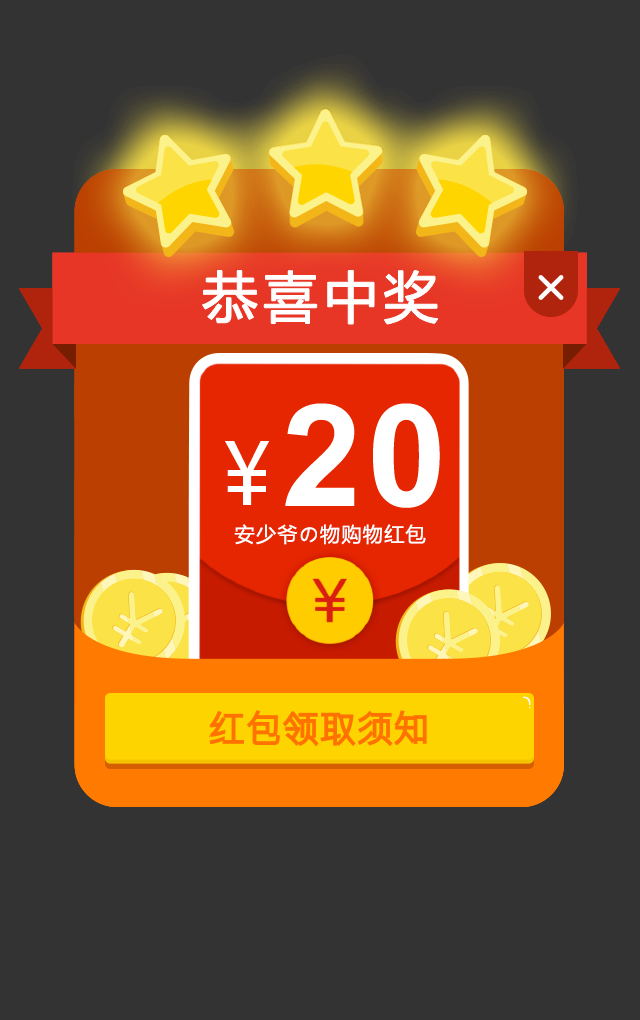
<style>
.page{position:relative;width:640px;height:1020px;background:#333333}
.page>*{position:absolute;margin:0}
.t1{font:54.9px "MicrosoftYaHei";letter-spacing:0.1em;color:#ffffff}
.t2{font:142.6px "Arial-BoldMT";letter-spacing:0.04em;color:#ffffff}
.t3{font:20.2px "MicrosoftYaHei";letter-spacing:0.06em;color:#f7f7f7}
</style>
<div class="page">
<p class="t1" style="left:202px;top:270px;width:236px;height:54px">恭喜中奖</p>
<p class="t1" style="left:202px;top:270px;width:236px;height:54px">恭喜中奖</p>
<p class="t1" style="left:202px;top:270px;width:236px;height:54px">恭喜中奖</p>
<p class="t2" style="left:285px;top:403px;width:155px;height:105px">20</p>
<p class="t2" style="left:293px;top:403px;width:147px;height:105px">10</p>
<p class="t3" style="left:234px;top:524px;width:192px;height:21px">安少爷の物购物红包</p>
<p class="t3" style="left:234px;top:524px;width:192px;height:21px">安少爷の物购物红包</p>
<p class="t3" style="left:234px;top:524px;width:192px;height:21px">安少爷の物购物红包</p>
</div>
